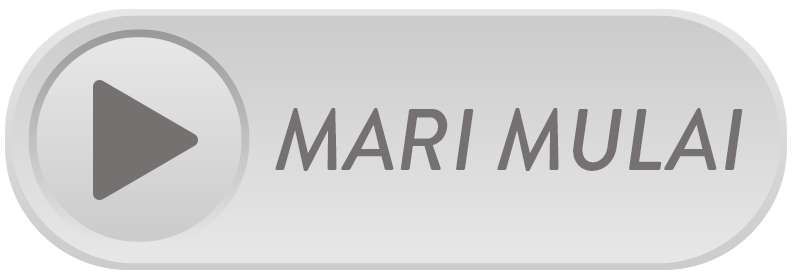
<style>
.page{position:relative;width:792px;height:278px}
.page>*{position:absolute;margin:0}
.t1{font:87.5px "BrandonGrotesque-MediumItalic";color:#767171;text-transform:uppercase}
</style>
<div class="page">
<p class="t1" style="left:275px;top:108px;width:468px;height:63px">MARI MULAI</p>
</div>
